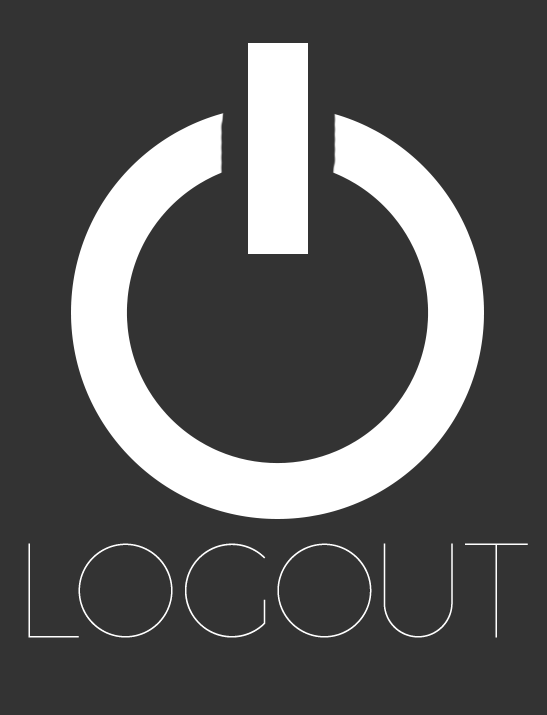
<style>
.page{position:relative;width:547px;height:715px;background:#333333}
.page>*{position:absolute;margin:0}
.t1{font:125px "Aspergit-Light";color:#ffffff}
</style>
<div class="page">
<p class="t1" style="left:28px;top:543px;width:500px;height:95px">LOGOUT</p>
</div>
